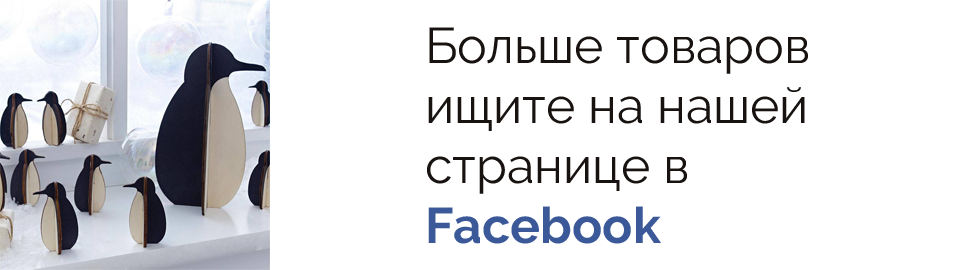
<style>
.page{position:relative;width:970px;height:270px;background:#ffffff}
.page>*{position:absolute;margin:0}
.t1{font:50px "Raleway-Regular";color:#181310}
.t2{font:50px "Raleway-Bold";color:#3b5998}
</style>
<div class="page">
<p class="t1" style="left:427px;top:27px;width:381px;height:217px">Больше товаров<br>ищите на нашей<br>странице в <br><span class="t2">Facebook</span></p>
</div>
